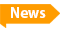
<style>
.page{position:relative;width:60px;height:30px;background:#ffffff}
.page>*{position:absolute;margin:0}
.t1{font:15px "MyriadPro-Bold";color:#ffffff}
</style>
<div class="page">
<p class="t1" style="left:11px;top:7px;width:35px;height:11px">News</p>
</div>
